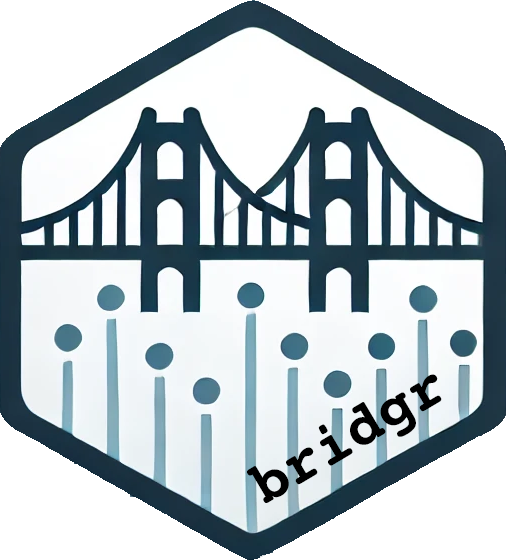
<style>
.page{position:relative;width:506px;height:560px;background:#ffffff}
.page>*{position:absolute;margin:0}
.t1{font:60px "Courier-Bold";color:#000000}
</style>
<div class="page">
<p class="t1" style="left:247px;top:374px;width:195px;height:129px;rotate:-31deg">bridgr</p>
</div>
